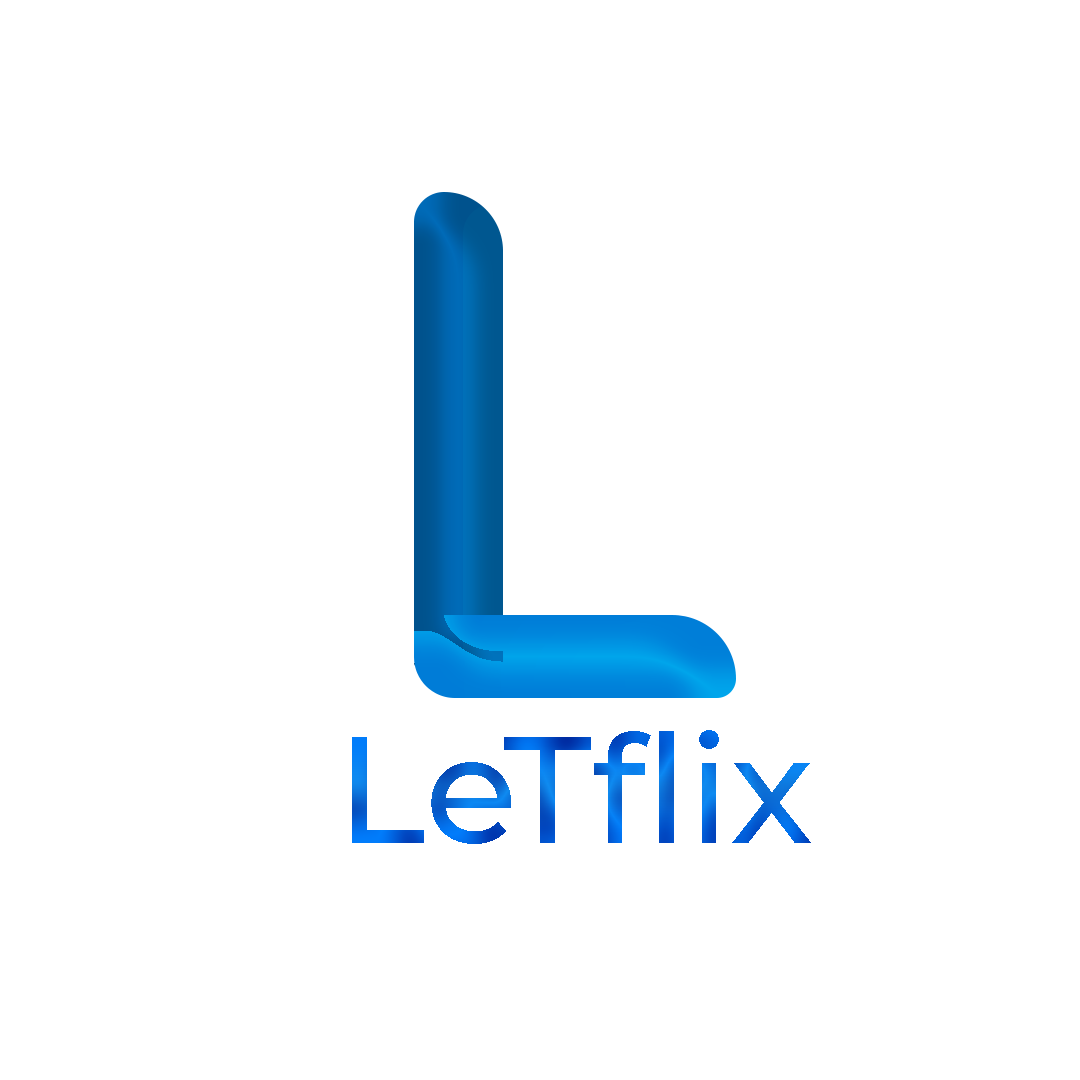
<style>
.page{position:relative;width:1080px;height:1080px;background:#ffffff}
.page>*{position:absolute;margin:0}
.t1{font:151.2px "Montserrat-Medium"}
</style>
<div class="page">
<p class="t1" style="left:352px;top:730px;width:459px;height:114px">LeTflix</p>
</div>
